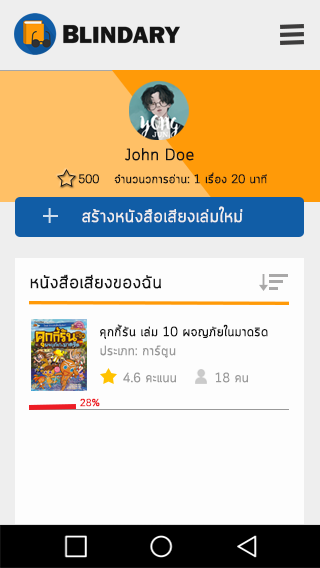
<style>
.page{position:relative;width:320px;height:568px;background:#fdfdfd}
.page>*{position:absolute;margin:0}
.t1{font:16px "Cloud-Light";color:#141414;font-weight:bold}
.t2{font:12px "Cloud-Light";color:#141414;font-weight:bold}
.t3{font:17.6px "Cloud-Light";color:#efefef;font-weight:bold}
.t4{font:18px "Cloud-Light";color:#141414;font-weight:bold}
.t5{font:13px "Cloud-Light";color:#141414;font-weight:bold}
.t6{font:13px "Cloud-Light";color:#999999;font-weight:bold}
.t7{font:10px "Cloud-Light";color:#ed1c24;font-weight:bold}
</style>
<div class="page">
<p class="t1" style="left:125px;top:148px;width:69px;height:13px">John Doe</p>
<p class="t2" style="left:78px;top:172px;width:189px;height:12px">500 จำนวนวการอ่าน: 1 เรื่อง 20 นาที</p>
<p class="t3" style="left:82px;top:206px;width:161px;height:17px">สร้างหนังสือเสียงเล่มใหม่</p>
<p class="t4" style="left:30px;top:274px;width:131px;height:15px">หนังสือเสียงของฉัน</p>
<p class="t5" style="left:100px;top:324px;width:168px;height:15px">คุกกี้รัน เล่ม 10 ผจญภัยในมาดริด</p>
<p class="t6" style="left:100px;top:345px;width:76px;height:13px">ประเภท: การ์ตูน</p>
<p class="t6" style="left:123px;top:372px;width:53px;height:11px">4.6 คะแนน</p>
<p class="t6" style="left:215px;top:372px;width:33px;height:11px">18 คน</p>
<p class="t7" style="left:80px;top:398px;width:20px;height:9px">28%</p>
</div>
